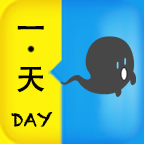
<style>
.page{position:relative;width:144px;height:144px}
.page>*{position:absolute;margin:0}
.t1{font:30px "AdobeHeitiStd-Regular";color:#000000}
.t2{font:18px "Chalkduster";color:#000000}
</style>
<div class="page">
<p class="t1" style="left:17px;top:25px;width:28px;height:68px;text-align:center">一   天</p>
<p class="t2" style="left:11px;top:111px;width:42px;height:16px">DAY</p>
</div>
